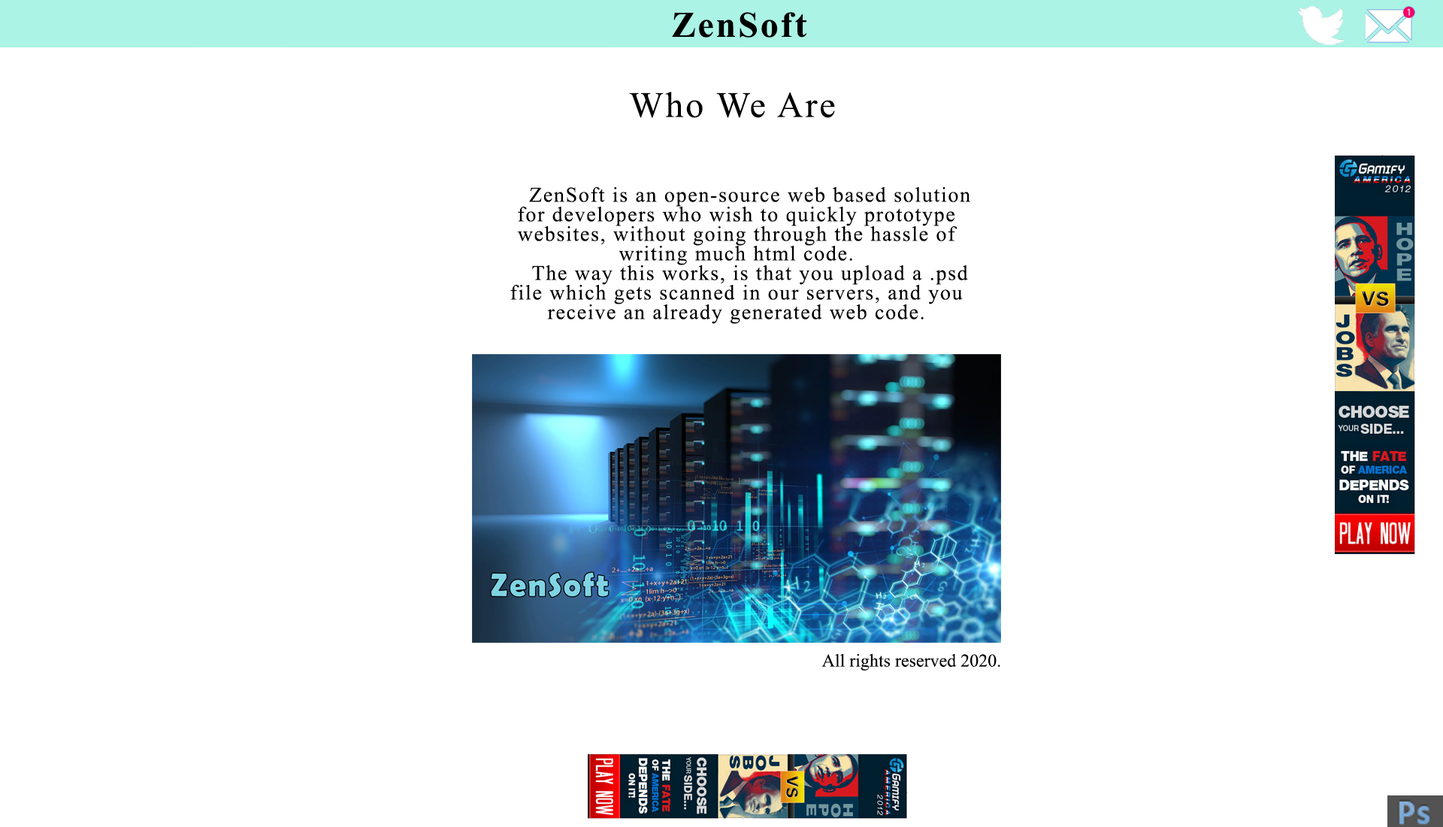
<style>
.page{position:relative;width:1443px;height:827px;background:#ffffff}
.page>*{position:absolute;margin:0}
.t1{font:36.1px "TimesNewRomanPS-BoldMT";letter-spacing:0.06em;color:#000000}
.t2{font:36.1px "TimesNewRomanPSMT";letter-spacing:0.06em;color:#000000}
.t3{font:21px/19.5px "TimesNewRomanPSMT";letter-spacing:0.06em;color:#000000}
.t4{font:18px "TimesNewRomanPSMT";color:#000000}
</style>
<div class="page">
<p class="t1" style="left:672px;top:12px;width:134px;height:26px">ZenSoft</p>
<p class="t2" style="left:629px;top:92px;width:206px;height:26px">Who We Are</p>
<p class="t3" style="left:510px;top:186px;width:460px;height:138px;text-align:center">ZenSoft is an open-source web based solution<br>for developers who wish to quickly prototype <br>websites, without going through the hassle of <br>writing much html code.<br> The way this works, is that you upload a .psd <br>file which gets scanned in our servers, and you <br>receive an already generated web code.</p>
<p class="t4" style="left:821px;top:653px;width:179px;height:17px">All rights reserved 2020.</p>
</div>
